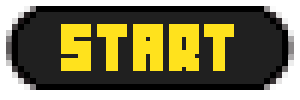
<style>
.page{position:relative;width:300px;height:100px;background:#202020}
.page>*{position:absolute;margin:0}
.t1{font:60px "04b19";letter-spacing:0.025em;color:#ffe21d}
</style>
<div class="page">
<p class="t1" style="left:61px;top:24px;width:173px;height:47px">START</p>
</div>
